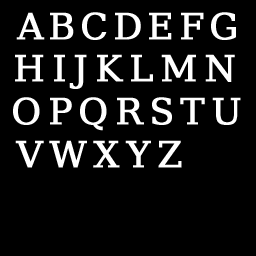
<style>
.page{position:relative;width:256px;height:256px;background:#000000}
.page>*{position:absolute;margin:0}
.t1{font:36px "BitstreamVeraSerif-Roman";letter-spacing:0.12em;color:#ffffff;font-weight:bold}
.t2{font:36px "BitstreamVeraSerif-Roman";letter-spacing:0.17em;color:#ffffff;font-weight:bold}
.t3{font:36px "BitstreamVeraSerif-Roman";letter-spacing:0.16em;color:#ffffff;font-weight:bold}
</style>
<div class="page">
<p class="t1" style="left:16px;top:12px;width:220px;height:28px">ABCDEFG</p>
<p class="t2" style="left:15px;top:54px;width:220px;height:35px">HIJKLMN</p>
<p class="t3" style="left:13px;top:97px;width:228px;height:34px">OPQRSTU</p>
<p class="t2" style="left:15px;top:140px;width:167px;height:28px">VWXYZ</p>
</div>
